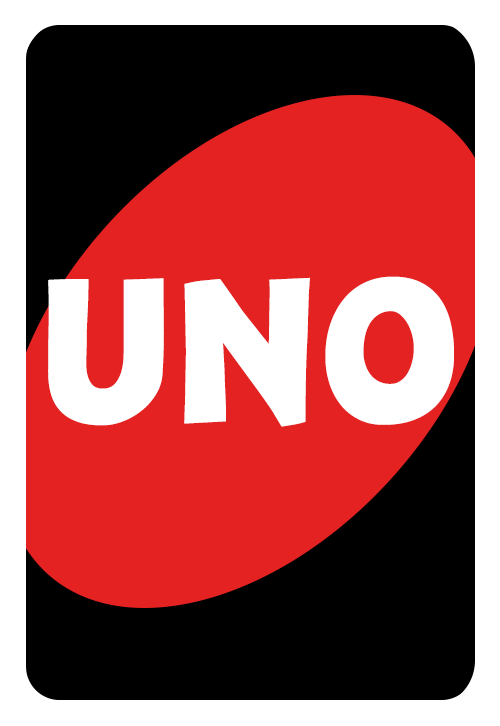
<style>
.page{position:relative;width:500px;height:726px;background:#e42222}
.page>*{position:absolute;margin:0}
.t1{font:208.3px "PBSKIDSHeadline-Regular";color:#ffffff;text-transform:uppercase}
</style>
<div class="page">
<p class="t1" style="left:48px;top:276px;width:406px;height:151px">UNO</p>
</div>
